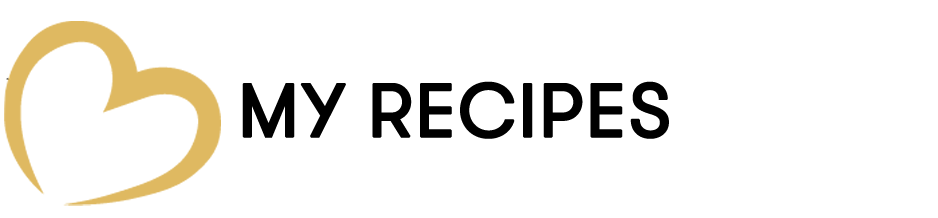
<style>
.page{position:relative;width:938px;height:218px;background:#ffffff}
.page>*{position:absolute;margin:0}
.t1{font:75px "GTWalsheim";color:#000000;font-weight:bold}
</style>
<div class="page">
<p class="t1" style="left:242px;top:81px;width:427px;height:58px">MY RECIPES</p>
</div>
